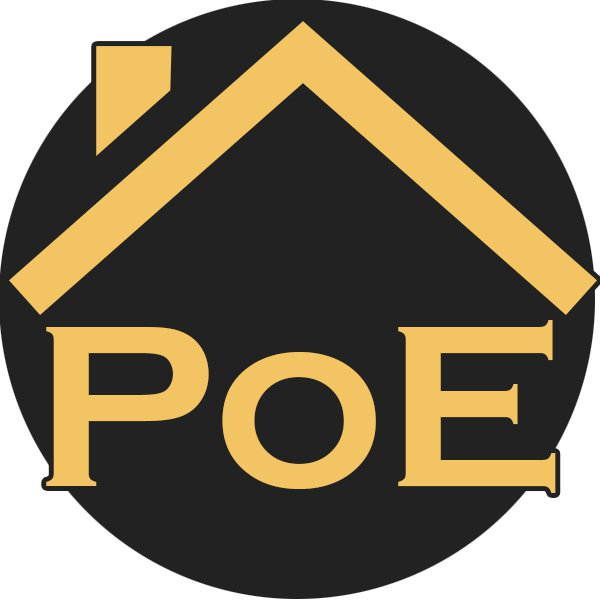
<style>
.page{position:relative;width:600px;height:600px;background:#222222}
.page>*{position:absolute;margin:0}
.t1{font:239px "CopperplateGothic-Bold";color:#f2c462}
</style>
<div class="page">
<p class="t1" style="left:46px;top:320px;width:510px;height:173px">PoE</p>
</div>
